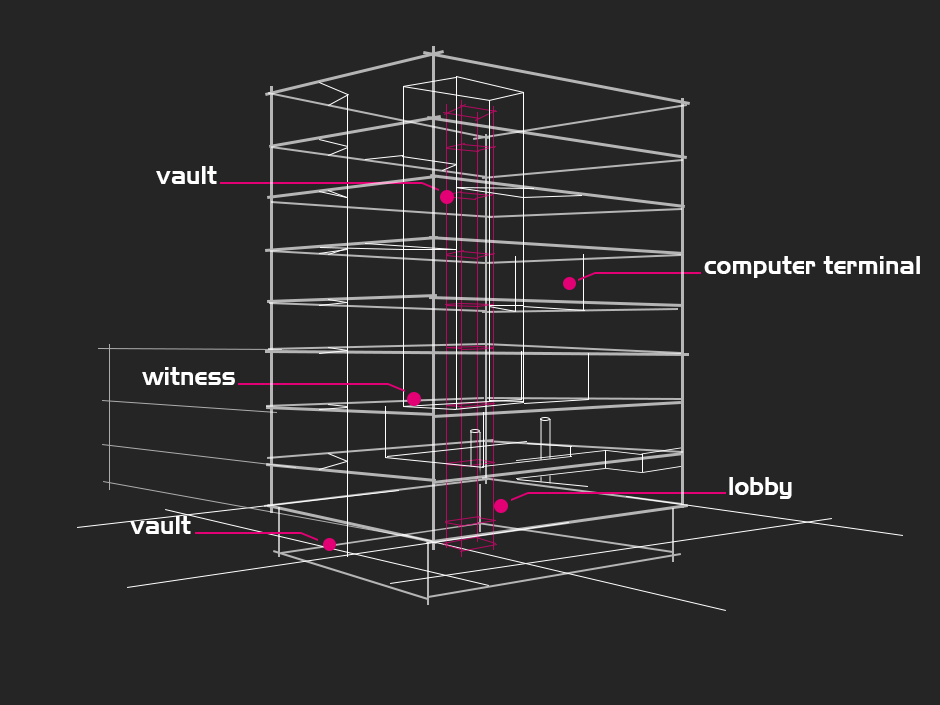
<style>
.page{position:relative;width:940px;height:705px;background:#252525}
.page>*{position:absolute;margin:0}
.t1{font:25px "Slider";color:#ffffff}
</style>
<div class="page">
<p class="t1" style="left:156px;top:166px;width:61px;height:18px">vault</p>
<p class="t1" style="left:704px;top:256px;width:216px;height:22px">computer terminal</p>
<p class="t1" style="left:142px;top:367px;width:93px;height:18px">witness</p>
<p class="t1" style="left:729px;top:477px;width:63px;height:22px">lobby</p>
<p class="t1" style="left:130px;top:516px;width:61px;height:18px">vault</p>
</div>
